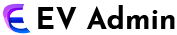
<style>
.page{position:relative;width:177px;height:35px;background:#ffffff}
.page>*{position:absolute;margin:0}
.t1{font:29.5px "JosefinSans-Bold";color:#000000}
</style>
<div class="page">
<p class="t1" style="left:38px;top:5px;width:137px;height:25px">EV Admin</p>
</div>
